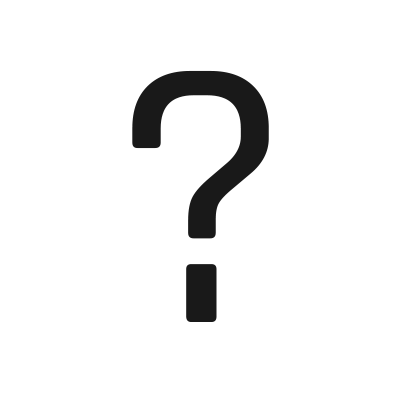
<style>
.page{position:relative;width:400px;height:400px;background:#ffffff}
.page>*{position:absolute;margin:0}
.t1{font:391.4px "Rajdhani-Medium";color:#191919}
</style>
<div class="page">
<p class="t1" style="left:132px;top:70px;width:137px;height:252px">?</p>
</div>
